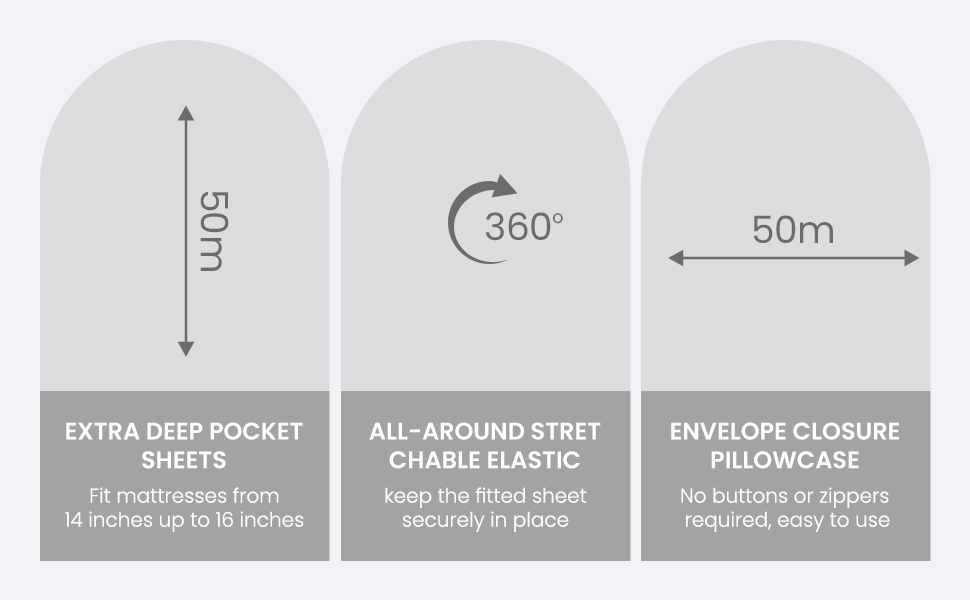
<style>
.page{position:relative;width:970px;height:600px;background:#dcdddf}
.page>*{position:absolute;margin:0}
.t1{font:37.5px "Poppins-Regular";color:#6c6c6c}
.t2{font:17.5px "Poppins-Regular";color:#6c6c6c}
.t3{font:24px "Poppins-SemiBold";color:#ffffff;text-transform:uppercase}
.t4{font:20px "Poppins-Light";color:#ffffff}
</style>
<div class="page">
<p class="t1" style="left:200px;top:191px;width:29px;height:80px;rotate:90deg">50m</p>
<p class="t1" style="left:485px;top:212px;width:78px;height:29px">360<span class="t2">o</span></p>
<p class="t1" style="left:753px;top:215px;width:80px;height:28px">50m</p>
<p class="t3" style="left:66px;top:422px;width:237px;height:47px;text-align:center">EXTRA DEEP POCKET<br>SHEETS</p>
<p class="t3" style="left:369px;top:422px;width:232px;height:47px;text-align:center">ALL-AROUND STRET<br>CHABLE ELASTIC</p>
<p class="t3" style="left:671px;top:422px;width:228px;height:47px;text-align:center">ENVELOPE CLOSURE<br>PILLOWCASE</p>
<p class="t4" style="left:65px;top:487px;width:239px;height:45px;text-align:center">Fit mattresses from<br>14 inches up to 16 inches</p>
<p class="t4" style="left:385px;top:487px;width:202px;height:45px;text-align:center">keep the fitted sheet<br>securely in place</p>
<p class="t4" style="left:681px;top:487px;width:209px;height:45px;text-align:center">No buttons or zippers <br>required, easy to use</p>
</div>
